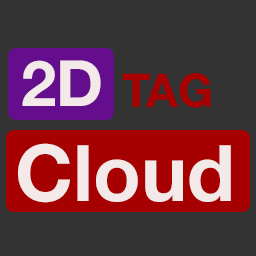
<style>
.page{position:relative;width:256px;height:256px;background:#333333}
.page>*{position:absolute;margin:0}
.t1{font:63.6px "HelveticaNeue-Bold";color:#f4e9e9}
.t2{font:46.5px "HelveticaNeue-Bold";color:#a60000}
.t3{font:78.2px "HelveticaNeue-Bold";color:#f4e9e9}
</style>
<div class="page">
<p class="t1" style="left:22px;top:60px;width:79px;height:46px">2D</p>
<p class="t2" style="left:122px;top:73px;width:89px;height:35px">TAG</p>
<p class="t3" style="left:18px;top:143px;width:213px;height:60px">Cloud</p>
</div>
